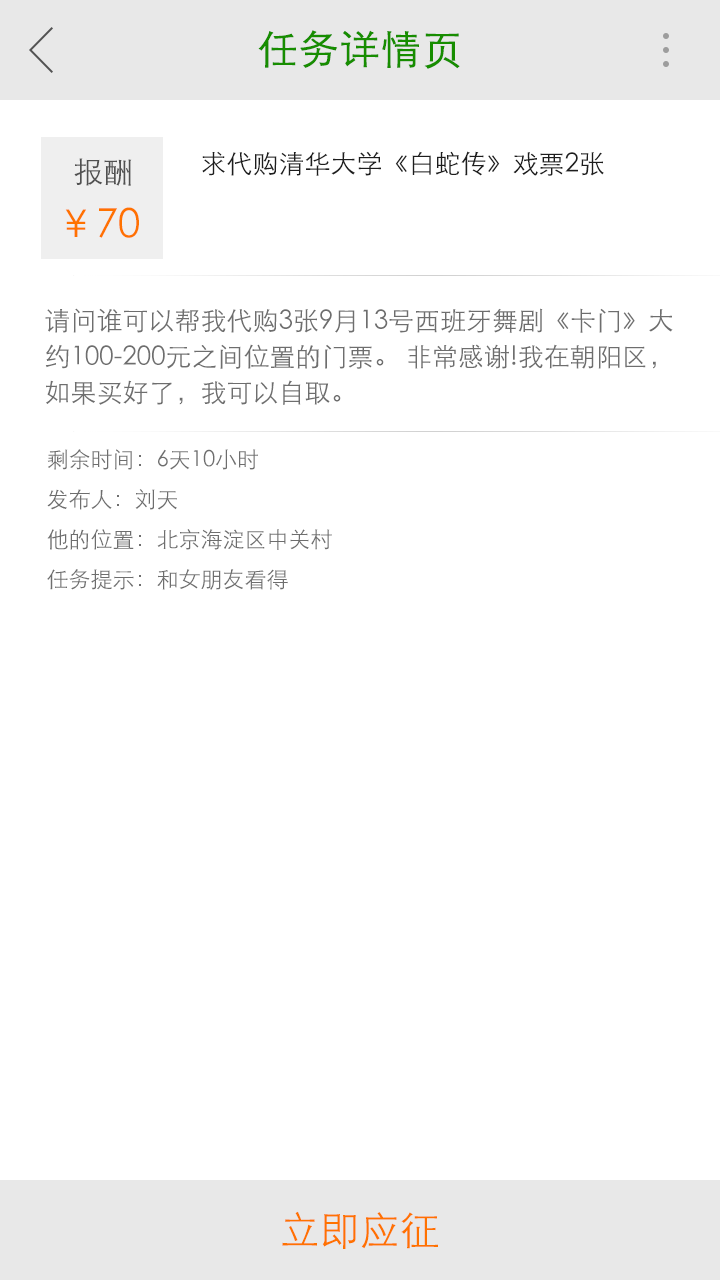
<style>
.page{position:relative;width:720px;height:1280px;background:#ffffff}
.page>*{position:absolute;margin:0}
.t1{font:40px "STXihei";color:#178d00;font-weight:bold}
.t2{font:40px/12px "STXihei";color:#ff7200}
.t3{font:36px/52px "STXihei";color:#767676}
.t4{font:30px/12px "STXihei";color:#515151}
.t5{font:26px "STXihei";color:#1d1d1d}
.t6{font:26px/36px "STXihei";color:#6e6e6e}
.t7{font:22px "STXihei";color:#6e6e6e}
.t8{font:40px "STXihei";color:#ff7200}
</style>
<div class="page">
<p class="t1" style="left:258px;top:30px;width:202px;height:39px">任务详情页</p>
<p class="t2" style="left:65px;top:158px;width:74px;height:80px;text-align:justify"><span class="t3">  </span><span class="t4">报酬<br></span>￥70</p>
<p class="t5" style="left:202px;top:151px;width:402px;height:25px">求代购清华大学《白蛇传》戏票2张</p>
<p class="t6" style="left:45px;top:308px;width:628px;height:97px;text-align:justify">请问谁可以帮我代购3张9月13号西班牙舞剧《卡门》大<br>约100-200元之间位置的门票。 非常感谢!我在朝阳区，<br>如果买好了，我可以自取。</p>
<p class="t7" style="left:47px;top:449px;width:211px;height:21px">剩余时间：6天10小时</p>
<p class="t7" style="left:47px;top:489px;width:130px;height:21px">发布人：刘天</p>
<p class="t7" style="left:47px;top:529px;width:285px;height:21px">他的位置：北京海淀区中关村</p>
<p class="t7" style="left:47px;top:569px;width:241px;height:21px">任务提示：和女朋友看得</p>
<p class="t8" style="left:282px;top:1211px;width:156px;height:38px">立即应征</p>
</div>
